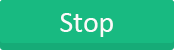
<style>
.page{position:relative;width:174px;height:50px;background:#18ba81}
.page>*{position:absolute;margin:0}
.t1{font:30px "Calibri";color:#fafafa}
</style>
<div class="page">
<p class="t1" style="left:60px;top:13px;width:53px;height:24px">Stop</p>
</div>
